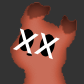
<style>
.page{position:relative;width:84px;height:84px;background:#333333}
.page>*{position:absolute;margin:0}
.t1{font:43.5px "DMSans-Regular";color:#ffffff}
</style>
<div class="page">
<p class="t1" style="left:13px;top:28px;width:26px;height:28px;rotate:19deg">x</p>
<p class="t1" style="left:34px;top:32px;width:26px;height:28px;rotate:19deg">x</p>
</div>
